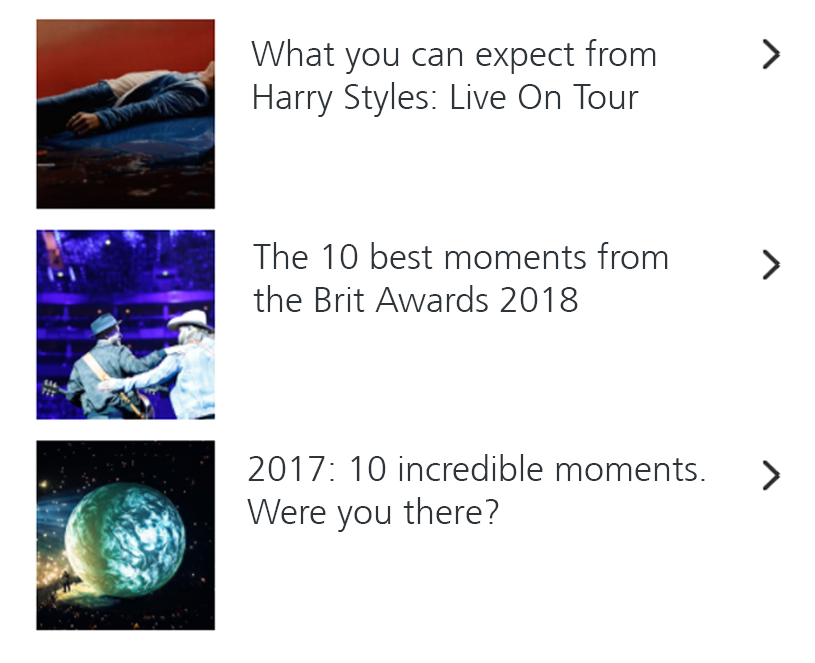
<style>
.page{position:relative;width:815px;height:663px;background:#ffffff}
.page>*{position:absolute;margin:0}
.t1{font:36px "FrutigerCE-Light";color:#2d353a}
</style>
<div class="page">
<p class="t1" style="left:251px;top:39px;width:405px;height:78px">What you can expect from<br>Harry Styles: Live On Tour</p>
<p class="t1" style="left:253px;top:242px;width:415px;height:70px">The 10 best moments from <br>the Brit Awards 2018</p>
<p class="t1" style="left:247px;top:454px;width:458px;height:78px">2017: 10 incredible moments.<br>Were you there?</p>
</div>
